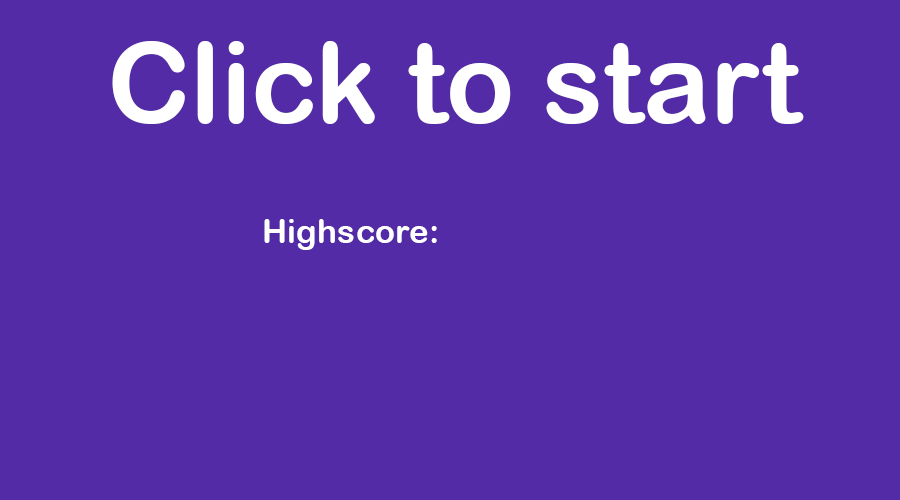
<style>
.page{position:relative;width:900px;height:500px;background:#542ba6}
.page>*{position:absolute;margin:0}
.t1{font:112.5px "ArialRoundedMTBold";color:#ffffff}
.t2{font:33.3px "ArialRoundedMTBold";color:#ffffff}
</style>
<div class="page">
<p class="t1" style="left:112px;top:41px;width:692px;height:83px">Click to start</p>
<p class="t2" style="left:264px;top:219px;width:173px;height:31px">Highscore:</p>
</div>
